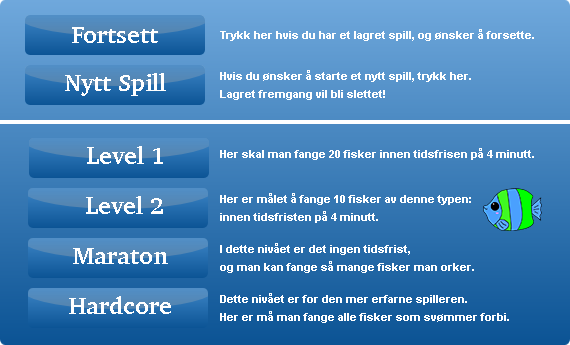
<style>
.page{position:relative;width:570px;height:345px}
.page>*{position:absolute;margin:0}
.t1{font:11px "Arial-BoldMT";color:#ffffff}
.t2{font:11px/18px "Arial-BoldMT";color:#ffffff}
</style>
<div class="page">
<p class="t1" style="left:220px;top:29px;width:314px;height:12px">Trykk her hvis du har et lagret spill, og ønsker å forsette.</p>
<p class="t2" style="left:220px;top:70px;width:251px;height:30px">Hvis du ønsker å starte et nytt spill, trykk her.<br>Lagret fremgang vil bli slettet!</p>
<p class="t1" style="left:220px;top:148px;width:314px;height:12px">Her skal man fange 20 fisker innen tidsfrisen på 4 minutt.</p>
<p class="t2" style="left:220px;top:193px;width:251px;height:30px">Her er målet å fange 10 fisker av denne typen: <br>innen tidsfristen på 4 minutt.</p>
<p class="t2" style="left:220px;top:243px;width:254px;height:30px">I dette nivået er det ingen tidsfrist, <br>og man kan fange så mange fisker man orker.</p>
<p class="t2" style="left:220px;top:293px;width:289px;height:30px">Dette nivået er for den mer erfarne spilleren. <br>Her er må man fange alle fisker som svømmer forbi.</p>
</div>
